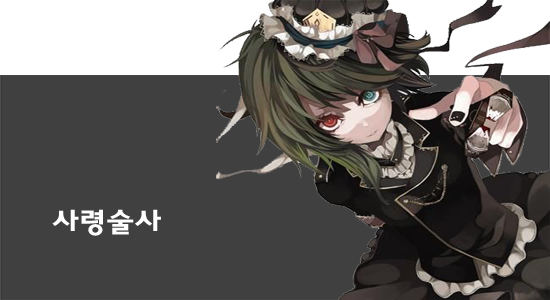
<style>
.page{position:relative;width:550px;height:300px;background:#404040}
.page>*{position:absolute;margin:0}
.t1{font:27px "HaanYGodic25";color:#ffffff;scale:1.13 1}
</style>
<div class="page">
<p class="t1" style="left:52px;top:209px;width:109px;height:27px">사령술사</p>
</div>
